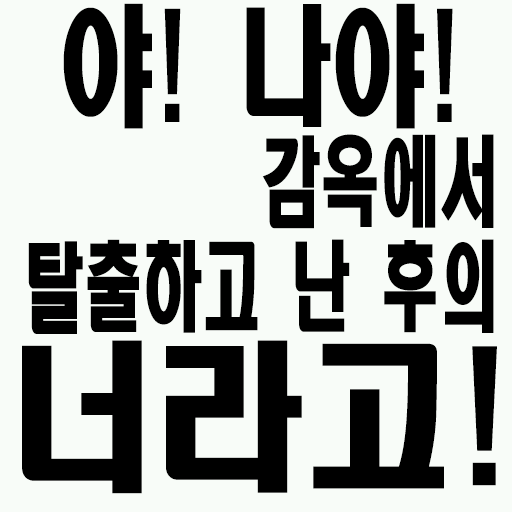
<style>
.page{position:relative;width:512px;height:512px;background:#f8fcf8}
.page>*{position:absolute;margin:0}
.t1{font:129.6px "HeadlineR-HM";color:#000000;scale:0.72 1}
.t2{font:97.2px/105px "HeadlineR-HM";color:#000000;scale:0.61 1}
.t3{font:158.4px "HeadlineR-HM";color:#000000;scale:0.94 1}
</style>
<div class="page">
<p class="t1" style="left:63px;top:3px;width:390px;height:126px">야! 나야!</p>
<p class="t2" style="left:28px;top:134px;width:466px;height:200px;text-align:right">감옥에서 탈출하고 난 후의</p>
<p class="t3" style="left:22px;top:340px;width:475px;height:154px">너라고!</p>
</div>
